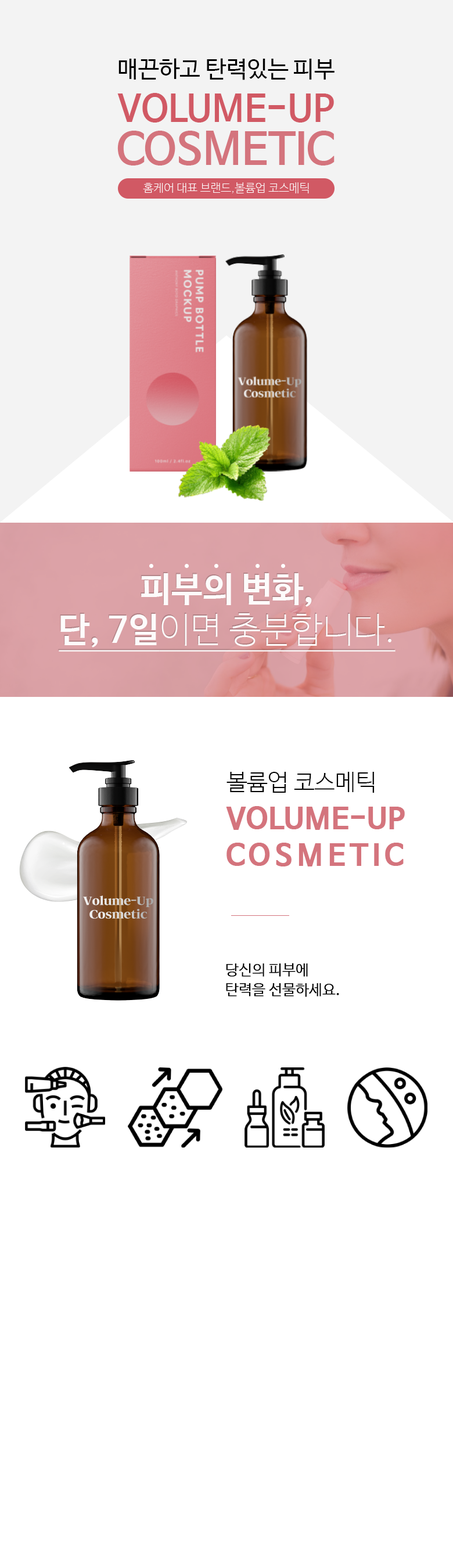
<style>
.page{position:relative;width:453px;height:1568px;background:#ffffff}
.page>*{position:absolute;margin:0}
.t1{font:23.2px "NanumBarunGothic";color:#000000}
.t2{font:36.6px "NanumBarunGothicBold";color:#d15964}
.t3{font:44.1px "NanumBarunGothicBold";color:#d4747d}
.t4{font:11.6px "NanumBarunGothicUltraLight";color:#ffffff}
.t5{font:34.8px/40.7px "NanumBarunGothicUltraLight";color:#ffffff;text-decoration:underline}
.t6{font:34.8px/40.7px "NanumBarunGothicBold";color:#ffffff}
.t7{font:34.8px/40.7px "NanumBarunGothicBold";color:#ffffff;text-decoration:underline}
.t8{font:23.2px "NanumBarunGothicLight";color:#000000}
.t9{font:29px "NanumBarunGothicBold";color:#d4747d;font-weight:bold}
.t10{font:29px "NanumBarunGothicBold";letter-spacing:0.14em;color:#d4747d;font-weight:bold}
.t11{font:14.5px/19.7px "NanumBarunGothicLight";color:#000000;font-weight:bold}
</style>
<div class="page">
<p class="t1" style="left:118px;top:58px;width:217px;height:22px">매끈하고 탄력있는 피부</p>
<p class="t2" style="left:117px;top:93px;width:217px;height:30px">VOLUME-UP</p>
<p class="t3" style="left:117px;top:131px;width:218px;height:35px">COSMETIC</p>
<p class="t4" style="left:143px;top:182px;width:166px;height:11px">홈케어 대표 브랜드,볼륨업 코스메틱</p>
<p class="t5" style="left:59px;top:573px;width:336px;height:79px;text-align:center;opacity:0.95"><span class="t6">피부의 변화,<br></span><span class="t7">단, 7일</span>이면 충분합니다.</p>
<p class="t8" style="left:226px;top:772px;width:149px;height:21px">볼륨업 코스메틱</p>
<p class="t9" style="left:226px;top:806px;width:179px;height:24px">VOLUME-UP</p>
<p class="t10" style="left:226px;top:843px;width:178px;height:23px">COSMETIC</p>
<p class="t11" style="left:226px;top:963px;width:113px;height:34px">당신의 피부에<br>탄력을 선물하세요.</p>
</div>
